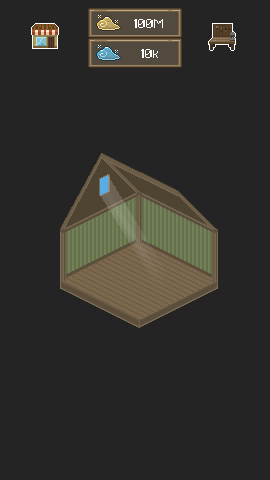
<style>
.page{position:relative;width:270px;height:480px;background:#242424}
.page>*{position:absolute;margin:0}
.t1{font:20.8px "HeartbitXX";color:#ffffff}
</style>
<div class="page">
<p class="t1" style="left:134px;top:19px;width:29px;height:9px">100M</p>
<p class="t1" style="left:141px;top:49px;width:17px;height:9px">10k</p>
</div>
